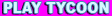
<style>
.page{position:relative;width:112px;height:16px;background:#ff00ff}
.page>*{position:absolute;margin:0}
.t1{font:14.7px "Arial-Black";color:#d6f7ff;scale:0.92 1}
</style>
<div class="page">
<p class="t1" style="left:4px;top:2px;width:105px;height:11px">PLAY TYCOON</p>
</div>
